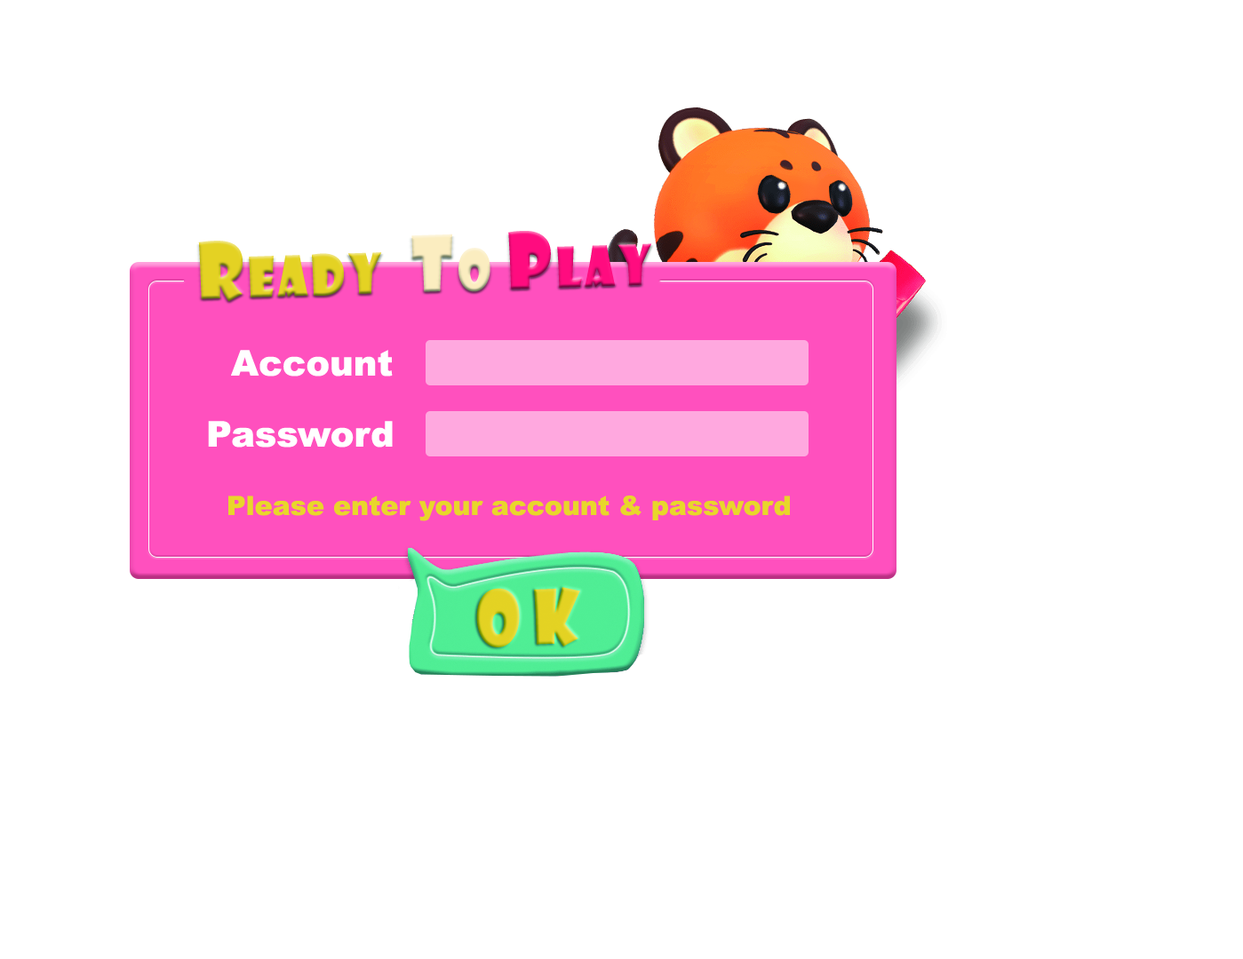
<style>
.page{position:relative;width:1243px;height:959px;background:#ffffff}
.page>*{position:absolute;margin:0}
.t1{font:54.1px "ShowcardGothic-Reg";letter-spacing:0.075em;color:#e4d223;scale:0.88 1}
.t2{font:75.2px "ShowcardGothic-Reg";letter-spacing:0.075em;color:#e4d223;scale:0.88 1}
.t3{font:75.2px "ShowcardGothic-Reg";letter-spacing:0.075em;color:#fbedc0;scale:0.88 1}
.t4{font:54.1px "ShowcardGothic-Reg";letter-spacing:0.075em;color:#fbedc0;scale:0.88 1}
.t5{font:75.2px "ShowcardGothic-Reg";letter-spacing:0.075em;color:#ff0c7f;scale:0.88 1}
.t6{font:54.1px "ShowcardGothic-Reg";letter-spacing:0.075em;color:#ff0c7f;scale:0.88 1}
.t7{font:35.5px "Arial-Black";color:#ffffff}
.t8{font:26.7px "Arial-Black";color:#e8d62b}
</style>
<div class="page">
<p class="t1" style="left:198px;top:231px;width:454px;height:71px;rotate:-2deg"><span class="t2">R</span>eady  <span class="t3">T</span><span class="t4">o </span><span class="t5">P</span><span class="t6">lay</span></p>
<p class="t7" style="left:231px;top:350px;width:162px;height:27px">Account</p>
<p class="t7" style="left:208px;top:421px;width:185px;height:27px">Password</p>
<p class="t8" style="left:228px;top:496px;width:562px;height:25px">Please enter your account &amp; password</p>
</div>
